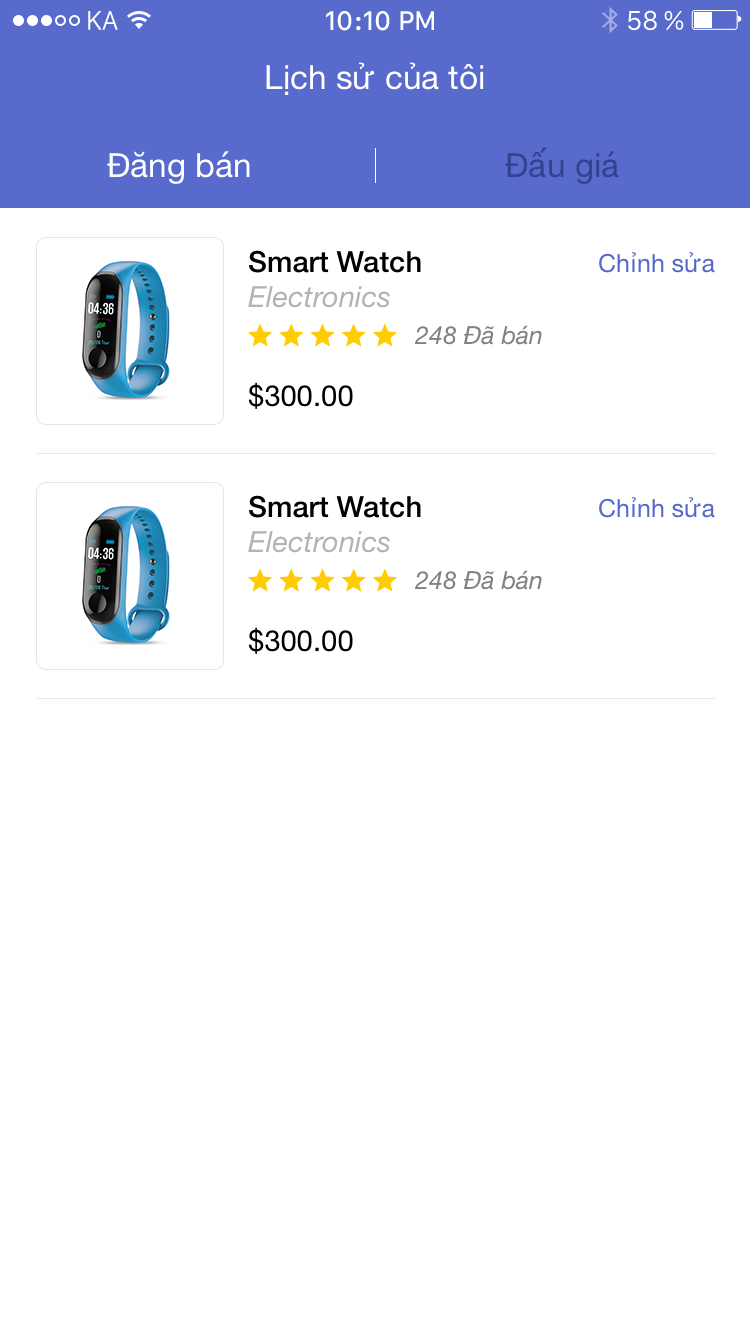
<style>
.page{position:relative;width:750px;height:1334px;background:#ffffff}
.page>*{position:absolute;margin:0}
.t1{font:33.3px "HelveticaNeue";color:#ffffff}
.t2{font:33.3px "HelveticaNeue";color:#33418e}
.t3{font:29.2px/29.2px "HelveticaNeue-Medium";color:#000000}
.t4{font:29.2px "HelveticaNeue-Italic";color:#b3b3b3}
.t5{font:25px "HelveticaNeue";color:#5668ca}
.t6{font:25px "HelveticaNeue-Italic";color:#808080}
.t7{font:29.2px "HelveticaNeue";color:#000000}
</style>
<div class="page">
<p class="t1" style="left:266px;top:62px;width:218px;height:33px">Lịch sử của tôi</p>
<p class="t2" style="left:505px;top:147px;width:114px;height:37px">Đấu giá</p>
<p class="t1" style="left:107px;top:151px;width:143px;height:33px">Đăng bán</p>
<p class="t3" style="left:248px;top:250px;width:173px;height:58px">Smart Watch<br><span class="t4">Electronics</span></p>
<p class="t5" style="left:599px;top:252px;width:116px;height:21px">Chỉnh sửa</p>
<p class="t6" style="left:415px;top:325px;width:127px;height:20px">248 Đã bán</p>
<p class="t7" style="left:248px;top:382px;width:105px;height:27px">$300.00</p>
<p class="t3" style="left:248px;top:495px;width:173px;height:58px">Smart Watch<br><span class="t4">Electronics</span></p>
<p class="t5" style="left:599px;top:497px;width:116px;height:21px">Chỉnh sửa</p>
<p class="t6" style="left:415px;top:570px;width:127px;height:20px">248 Đã bán</p>
<p class="t7" style="left:248px;top:627px;width:105px;height:27px">$300.00</p>
</div>
